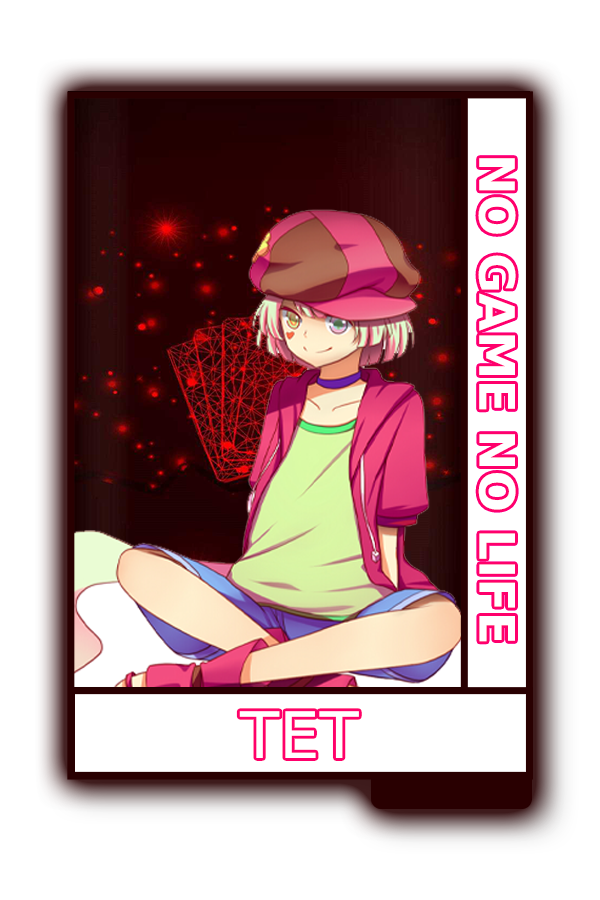
<style>
.page{position:relative;width:600px;height:900px;background:#ffffff}
.page>*{position:absolute;margin:0}
.t1{font:48.8px "MADETOMMY-Bold";color:#ffffff}
</style>
<div class="page">
<p class="t1" style="left:478px;top:158px;width:38px;height:484px;rotate:90deg">NO GAME NO LIFE</p>
</div>
